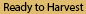
<style>
.page{position:relative;width:86px;height:14px;background:#e0bc6e}
.page>*{position:absolute;margin:0}
.t1{font:11.4px "MyriadPro-Regular";color:#000000}
</style>
<div class="page">
<p class="t1" style="left:4px;top:2px;width:80px;height:12px">Ready to Harvest</p>
</div>
